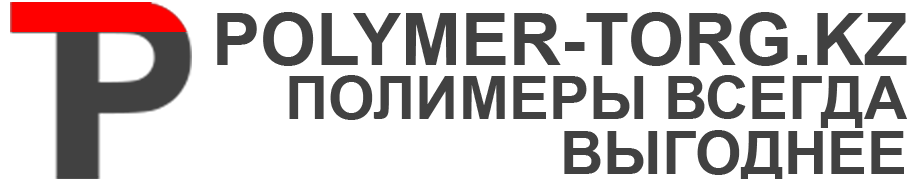
<style>
.page{position:relative;width:908px;height:179px;background:#ffffff}
.page>*{position:absolute;margin:0}
.t1{font:72px "Arial-BoldMT";color:#414141}
.t2{font:60px "Arial-BoldMT";color:#414141}
</style>
<div class="page">
<p class="t1" style="left:217px;top:12px;width:690px;height:54px">POLYMER-TORG.KZ</p>
<p class="t2" style="left:289px;top:75px;width:618px;height:53px">ПОЛИМЕРЫ ВСЕГДА</p>
</div>
